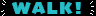
<style>
.page{position:relative;width:96px;height:16px;background:#000000}
.page>*{position:absolute;margin:0}
.t1{font:17.8px "Skia_2.919wght";letter-spacing:0.075em;color:#26bcc8;scale:1.03 1}
</style>
<div class="page">
<p class="t1" style="left:12px;top:2px;width:69px;height:12px">WALK!</p>
</div>
